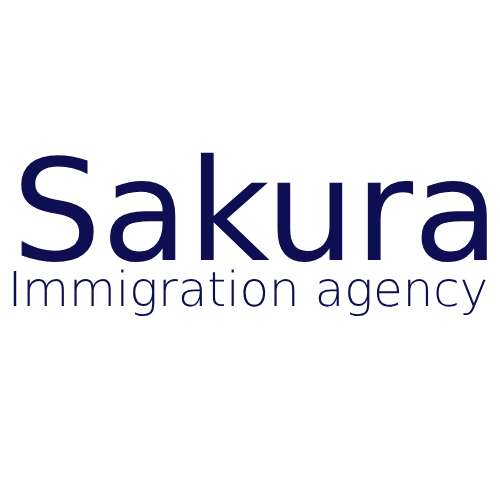
<style>
.page{position:relative;width:500px;height:500px;background:#ffffff}
.page>*{position:absolute;margin:0}
.t1{font:141.2px "DejaVuSans";color:#0e0e52}
.t2{font:48.1px "DejaVuSans-ExtraLight";color:#0e0e52}
</style>
<div class="page">
<p class="t1" style="left:21px;top:152px;width:466px;height:110px">Sakura</p>
<p class="t2" style="left:13px;top:269px;width:473px;height:47px">Immigration agency</p>
</div>
